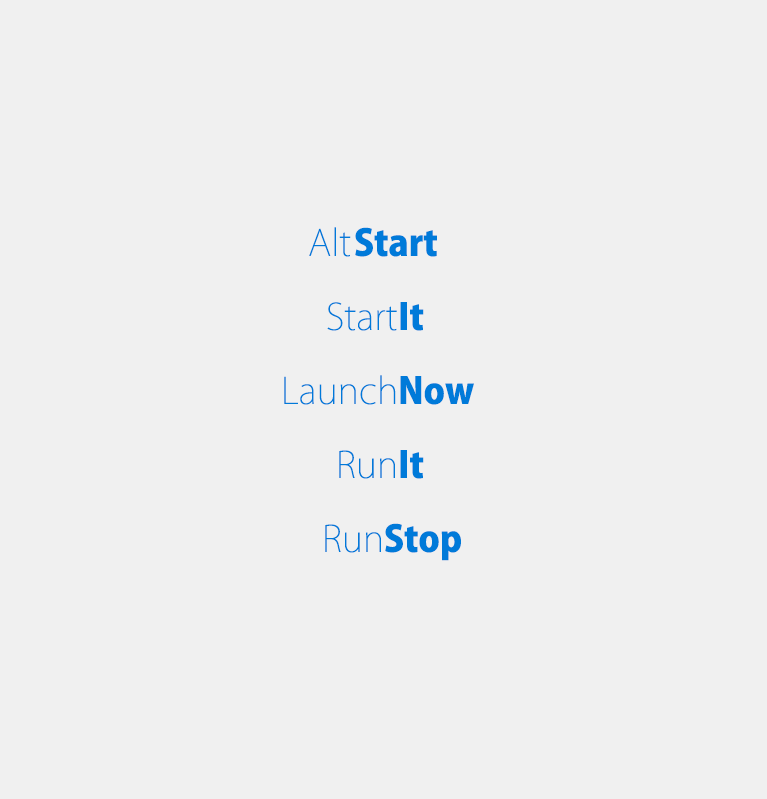
<style>
.page{position:relative;width:767px;height:799px;background:#f0f0f0}
.page>*{position:absolute;margin:0}
.t1{font:36px "KozGoPro-ExtraLight";color:#007ad9}
.t2{font:36px "KozGoPro-Heavy";color:#007ad9}
</style>
<div class="page">
<p class="t1" style="left:309px;top:227px;width:42px;height:30px">Alt</p>
<p class="t2" style="left:355px;top:227px;width:82px;height:30px">Start</p>
<p class="t1" style="left:327px;top:302px;width:70px;height:29px">Start</p>
<p class="t2" style="left:400px;top:302px;width:24px;height:29px">It</p>
<p class="t1" style="left:284px;top:375px;width:112px;height:30px">Launch</p>
<p class="t2" style="left:400px;top:376px;width:74px;height:29px">Now</p>
<p class="t1" style="left:339px;top:450px;width:56px;height:29px">Run</p>
<p class="t2" style="left:400px;top:450px;width:24px;height:29px">It</p>
<p class="t1" style="left:325px;top:524px;width:56px;height:29px">Run</p>
<p class="t2" style="left:385px;top:523px;width:76px;height:38px">Stop</p>
</div>
